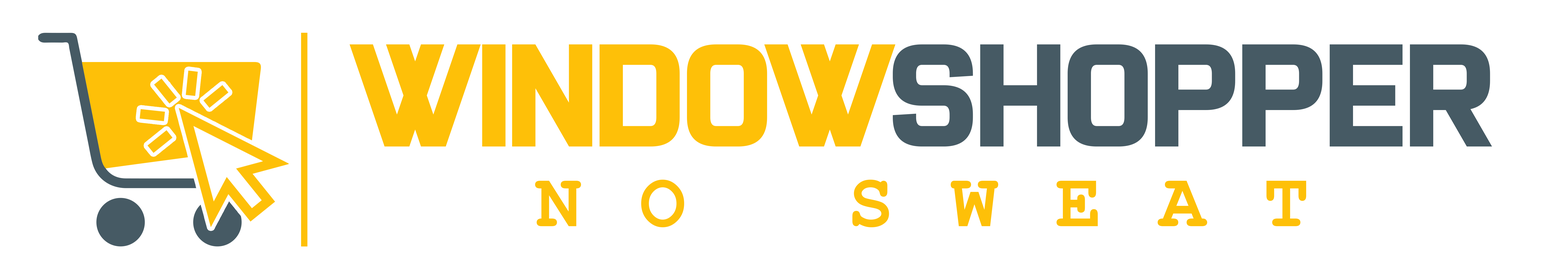
<style>
.page{position:relative;width:1568px;height:279px;background:#ffffff}
.page>*{position:absolute;margin:0}
.t1{font:149.1px "XHeighting";color:#465a64}
.t2{font:149.1px "XHeighting";color:#fec008}
.t3{font:76.5px "CourierNewPS-BoldMT";letter-spacing:0.76em;color:#fec008}
</style>
<div class="page">
<p class="t1" style="left:349px;top:44px;width:1143px;height:102px"><span class="t2">WINDOW</span>SHOPPER</p>
<p class="t3" style="left:535px;top:179px;width:771px;height:48px">NO SWEAT</p>
</div>
